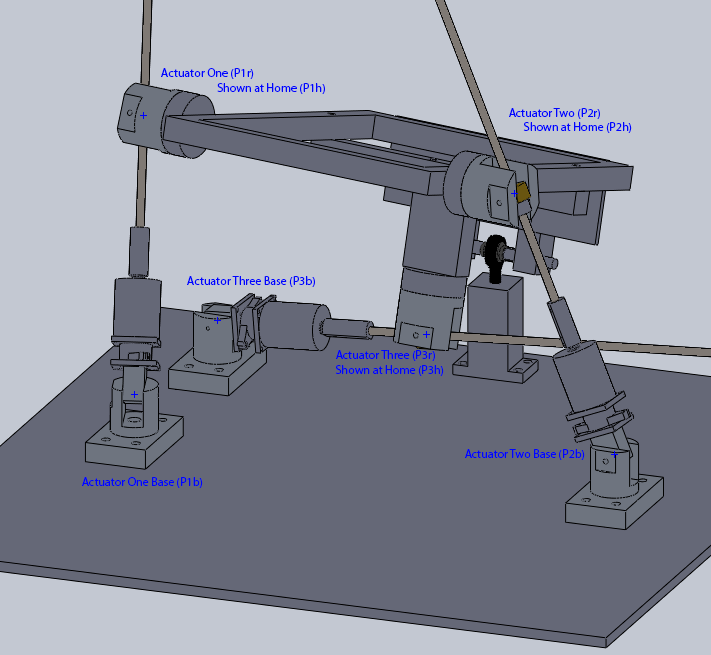
<style>
.page{position:relative;width:711px;height:655px;background:#c3c8d2}
.page>*{position:absolute;margin:0}
.t1{font:12px "MyriadPro-Regular";color:#0004ff}
</style>
<div class="page">
<p class="t1" style="left:161px;top:68px;width:164px;height:26px">Actuator One (P1r)<br>                      Shown at Home (P1h)</p>
<p class="t1" style="left:509px;top:108px;width:123px;height:25px">Actuator Two (P2r)<br>      Shown at Home (P2h)</p>
<p class="t1" style="left:187px;top:276px;width:128px;height:11px">Actuator Three Base (P3b)</p>
<p class="t1" style="left:335px;top:350px;width:109px;height:26px">Actuator Three (P3r)<br>Shown at Home (P3h)</p>
<p class="t1" style="left:465px;top:449px;width:120px;height:11px">Actuator Two Base (P2b)</p>
<p class="t1" style="left:82px;top:477px;width:121px;height:11px">Actuator One Base (P1b)</p>
</div>
